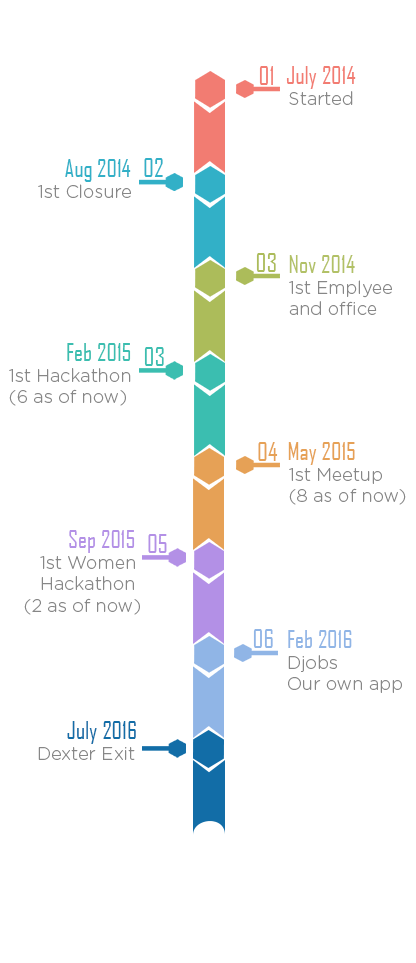
<style>
.page{position:relative;width:416px;height:963px;background:#ffffff}
.page>*{position:absolute;margin:0}
.t1{font:24.8px "AgencyFB-Reg";color:#f27c72}
.t2{font:24px "AgencyFB-Reg";color:#f27c72}
.t3{font:18px "GothamRounded-Light";color:#878787}
.t4{font:24px "AgencyFB-Reg";color:#32b0c7}
.t5{font:24.8px "AgencyFB-Reg";color:#32b0c7}
.t6{font:24.8px "AgencyFB-Reg";color:#acbc5a}
.t7{font:24px "AgencyFB-Reg";color:#b2c166}
.t8{font:24px "AgencyFB-Reg";color:#3bbeb0}
.t9{font:24.8px "AgencyFB-Reg";color:#3bbeb0}
.t10{font:24.8px "AgencyFB-Reg";color:#e6a156}
.t11{font:24px "AgencyFB-Reg";color:#e6a156}
.t12{font:24px "AgencyFB-Reg";color:#b390e6}
.t13{font:24.8px "AgencyFB-Reg";color:#b390e6}
.t14{font:24.8px "AgencyFB-Reg";color:#90b5e6}
.t15{font:24px "AgencyFB-Reg";color:#90b5e6}
.t16{font:24px "AgencyFB-Reg";color:#126da7}
</style>
<div class="page">
<p class="t1" style="left:259px;top:66px;width:14px;height:19px">01</p>
<p class="t2" style="left:286px;top:66px;width:70px;height:23px">July 2014</p>
<p class="t3" style="left:289px;top:91px;width:64px;height:14px">Started</p>
<p class="t4" style="left:65px;top:159px;width:66px;height:23px">Aug 2014</p>
<p class="t5" style="left:144px;top:158px;width:19px;height:19px">02</p>
<p class="t3" style="left:38px;top:184px;width:93px;height:14px">1st Closure</p>
<p class="t6" style="left:256px;top:253px;width:20px;height:19px">03</p>
<p class="t7" style="left:289px;top:255px;width:66px;height:18px">Nov 2014</p>
<p class="t3" style="left:289px;top:280px;width:103px;height:35px">1st Emplyee<br>and office</p>
<p class="t8" style="left:67px;top:343px;width:64px;height:18px">Feb 2015</p>
<p class="t9" style="left:144px;top:347px;width:20px;height:19px">03</p>
<p class="t3" style="left:9px;top:368px;width:122px;height:38px">1st Hackathon<br>(6 as of now)</p>
<p class="t10" style="left:258px;top:442px;width:20px;height:19px">04</p>
<p class="t11" style="left:288px;top:442px;width:67px;height:23px">May 2015</p>
<p class="t3" style="left:289px;top:468px;width:117px;height:37px">1st Meetup<br>(8 as of now)</p>
<p class="t12" style="left:69px;top:530px;width:66px;height:23px">Sep 2015</p>
<p class="t13" style="left:148px;top:534px;width:19px;height:19px">05</p>
<p class="t3" style="left:24px;top:556px;width:116px;height:59px">1st Women<br>   Hackathon<br>(2 as of now)</p>
<p class="t14" style="left:253px;top:629px;width:20px;height:19px">06</p>
<p class="t15" style="left:288px;top:630px;width:64px;height:18px">Feb 2016</p>
<p class="t3" style="left:288px;top:655px;width:114px;height:38px">Djobs<br>Our own app</p>
<p class="t16" style="left:67px;top:721px;width:69px;height:23px">July 2016</p>
<p class="t3" style="left:38px;top:747px;width:97px;height:13px">Dexter Exit</p>
</div>
